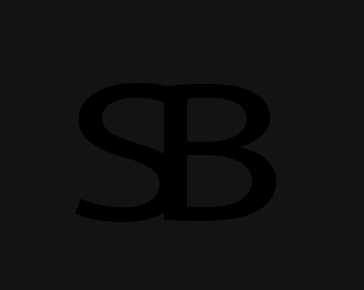
<style>
.page{position:relative;width:364px;height:290px;background:#151212}
.page>*{position:absolute;margin:0}
.t1{font:200.9px "MyriadPro-Regular";color:#000000;scale:1.32 1}
</style>
<div class="page">
<p class="t1" style="left:75px;top:82px;width:108px;height:140px">S</p>
<p class="t1" style="left:164px;top:83px;width:113px;height:139px">B</p>
</div>
